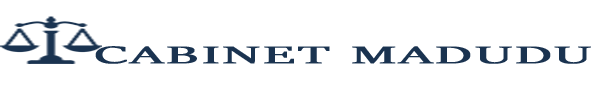
<style>
.page{position:relative;width:600px;height:108px;background:#ffffff}
.page>*{position:absolute;margin:0}
.t1{font:27px "SitkaBanner";letter-spacing:0.05em;color:#1a3350;text-transform:uppercase;font-weight:bold;scale:2.14 1}
</style>
<div class="page">
<p class="t1" style="left:95px;top:46px;width:496px;height:18px">Cabinet madudu</p>
</div>
